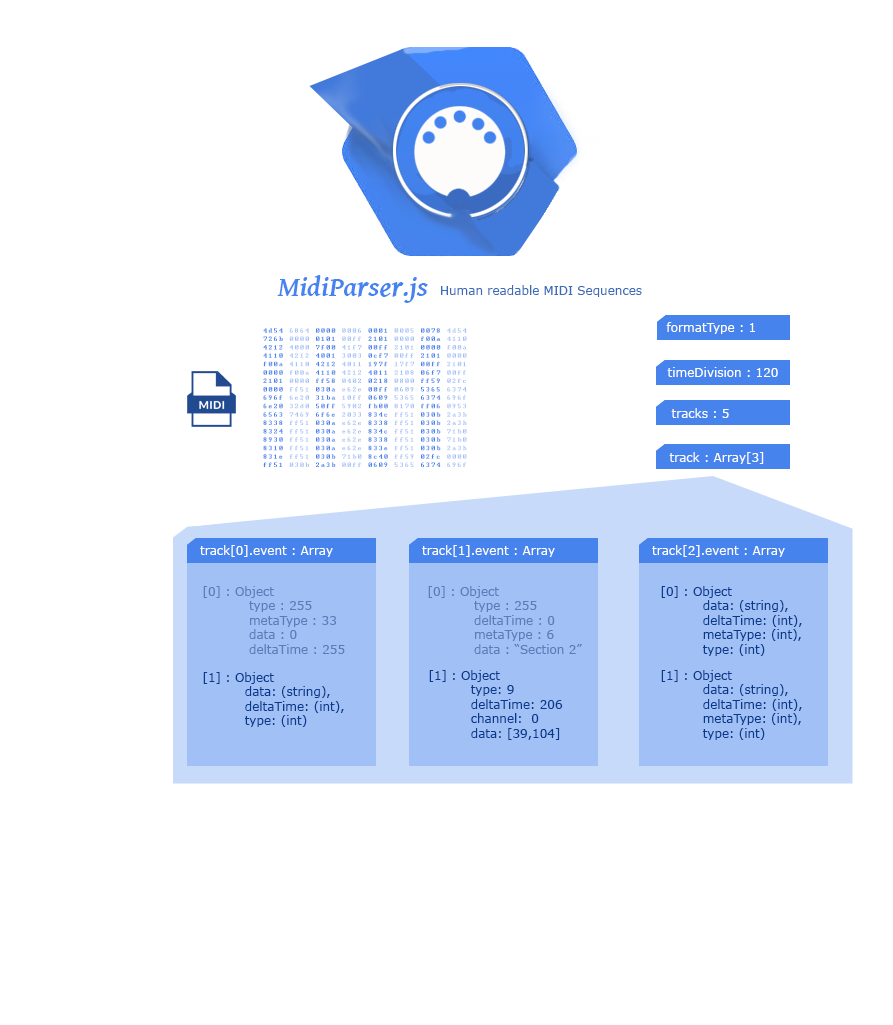
<style>
.page{position:relative;width:893px;height:1025px;background:#ffffff}
.page>*{position:absolute;margin:0}
.t1{font:7px "Terminal"}
.t2{font:12px "Verdana";color:#ffffff}
.t3{font:12px "Verdana";color:#5a7db9}
.t4{font:12px "Verdana";color:#07398d}
</style>
<div class="page">
<p class="t1" style="left:263px;top:328px;width:204px;height:139px">4d54 6864 0000 0006 0001 0005 0078 4d54<br>726b 0000 0101 00ff 2101 0000 f00a 4110<br>4212 4000 7f00 41f7 00ff 2101 0000 f00a<br>4110 4212 4001 3003 0cf7 00ff 2101 0000<br>f00a 4110 4212 4011 197f 17f7 00ff 2101<br>0000 f00a 4110 4212 4011 2108 06f7 00ff<br>2101 0000 ff58 0402 0218 0800 ff59 02fc<br>0000 ff51 030a e62e 00ff 0609 5365 6374<br>696f 6e20 31ba 10ff 0609 5365 6374 696f<br>6e20 32d0 50ff 5902 fb00 8170 ff06 0953<br>6563 7469 6f6e 2033 834c ff51 030b 2a3b<br>8338 ff51 030a e62e 8338 ff51 030b 2a3b<br>8324 ff51 030a e62e 834c ff51 030b 71b0<br>8930 ff51 030a e62e 8338 ff51 030b 71b0<br>8310 ff51 030a e62e 833e ff51 030b 2a3b<br>831e ff51 030b 71b0 8c40 ff59 02fc 0000<br>ff51 030b 2a3b 00ff 0609 5365 6374 696f</p>
<p class="t2" style="left:666px;top:322px;width:89px;height:12px">formatType : 1</p>
<p class="t2" style="left:667px;top:367px;width:111px;height:10px">timeDivision : 120</p>
<p class="t2" style="left:671px;top:408px;width:58px;height:10px">tracks : 5</p>
<p class="t2" style="left:669px;top:452px;width:95px;height:12px">track : Array[3]</p>
<p class="t2" style="left:200px;top:545px;width:133px;height:12px">track[0].event : Array</p>
<p class="t2" style="left:422px;top:545px;width:133px;height:12px">track[1].event : Array</p>
<p class="t2" style="left:652px;top:545px;width:133px;height:12px">track[2].event : Array</p>
<p class="t3" style="left:203px;top:586px;width:142px;height:68px">[0] : Object<br>           type : 255<br>           metaType : 33<br>           data : 0<br>           deltaTime : 255</p>
<p class="t3" style="left:428px;top:586px;width:154px;height:68px">[0] : Object<br>           type : 255<br>           deltaTime : 0<br>           metaType : 6<br>           data : “Section 2”</p>
<p class="t4" style="left:661px;top:586px;width:141px;height:70px">[0] : Object<br>          data: (string),<br>          deltaTime: (int),<br>          metaType: (int),<br>          type: (int)</p>
<p class="t4" style="left:203px;top:672px;width:141px;height:55px">[1] : Object<br>          data: (string),<br>          deltaTime: (int),<br>          type: (int)</p>
<p class="t4" style="left:429px;top:670px;width:134px;height:70px">[1] : Object<br>          type: 9<br>          deltaTime: 206<br>          channel:  0<br>          data: [39,104]</p>
<p class="t4" style="left:661px;top:670px;width:141px;height:70px">[1] : Object<br>          data: (string),<br>          deltaTime: (int),<br>          metaType: (int),<br>          type: (int)</p>
</div>
